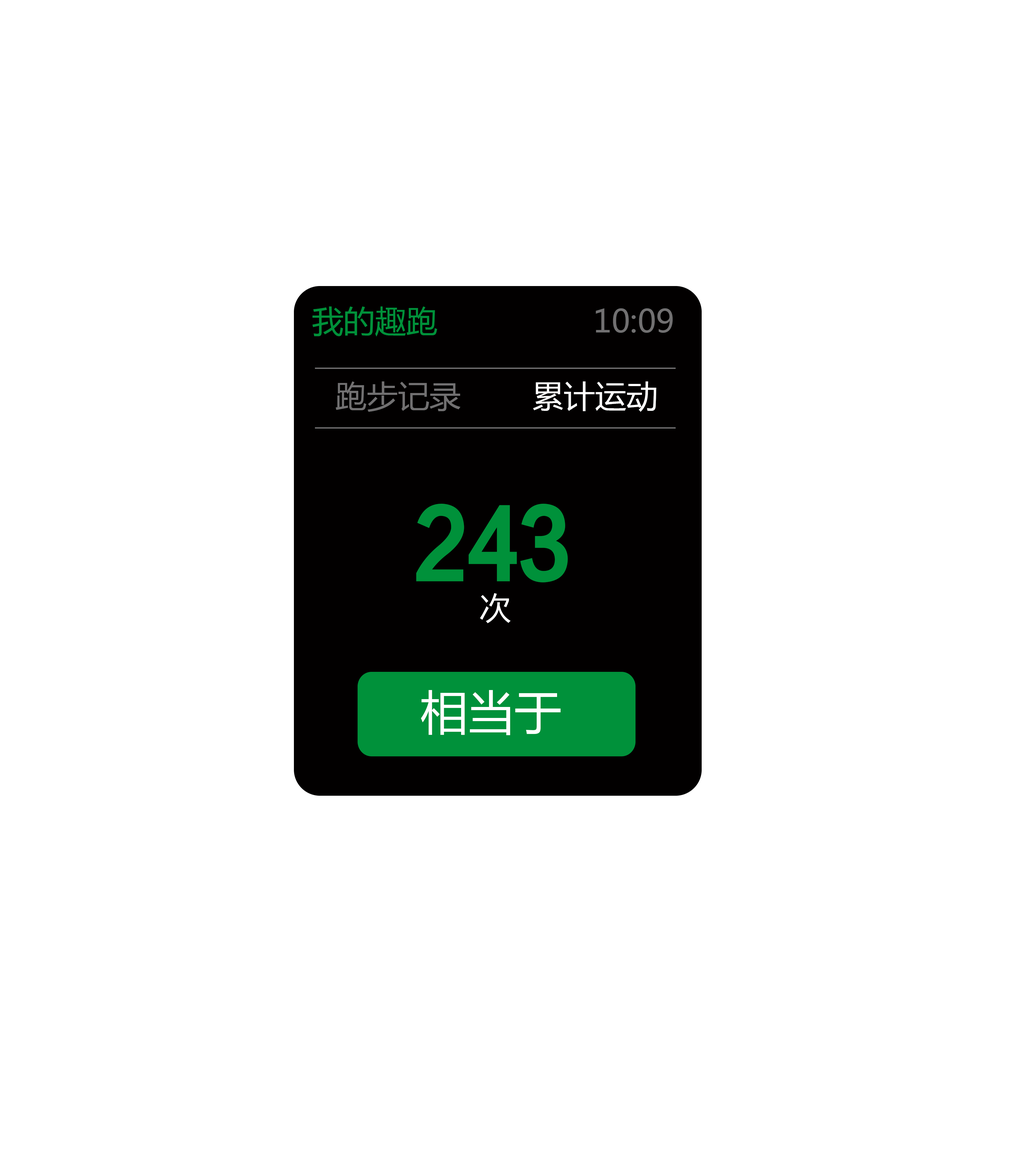
<style>
.page{position:relative;width:1026px;height:1163px;background:#ffffff}
.page>*{position:absolute;margin:0}
.t1{font:31.4px "MicrosoftYaHei";color:#00913a}
.t2{font:31.4px "MicrosoftYaHei";color:#717071}
.t3{font:31.4px "MicrosoftYaHei";color:#ffffff}
.t4{font:94.1px "FZCTHJW--GB1-0";color:#00913a}
.t5{font:47px "MicrosoftYaHei";color:#ffffff}
</style>
<div class="page">
<p class="t1" style="left:312px;top:306px;width:125px;height:30px">我的趣跑</p>
<p class="t2" style="left:595px;top:308px;width:78px;height:25px">10:09</p>
<p class="t2" style="left:335px;top:381px;width:125px;height:31px">跑步记录</p>
<p class="t3" style="left:533px;top:381px;width:123px;height:31px">累计运动</p>
<p class="t4" style="left:416px;top:503px;width:152px;height:79px">243</p>
<p class="t3" style="left:480px;top:593px;width:30px;height:30px">次</p>
<p class="t5" style="left:421px;top:690px;width:140px;height:45px">相当于</p>
</div>
